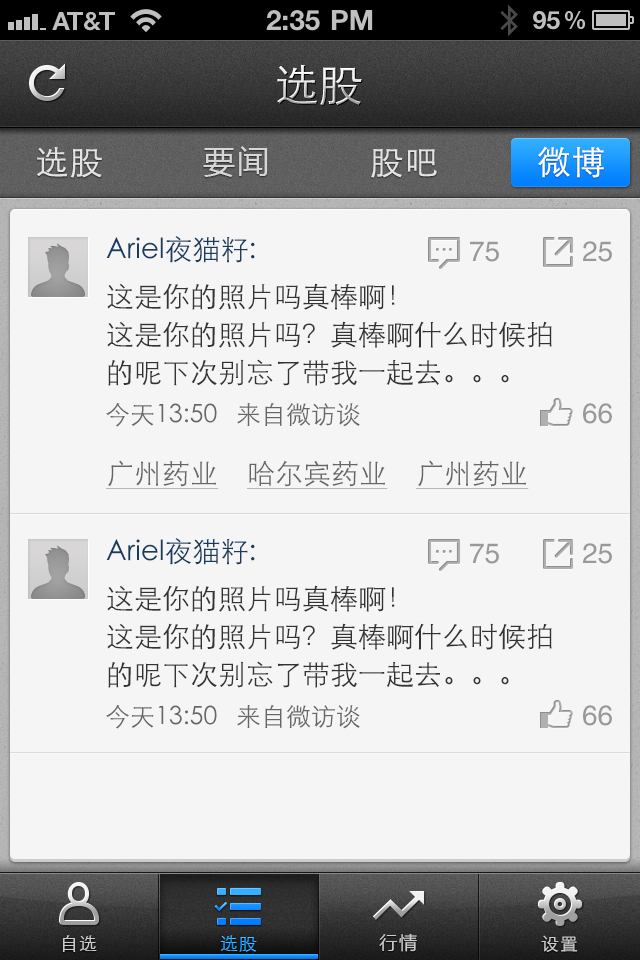
<style>
.page{position:relative;width:640px;height:960px;background:#f5f5f5}
.page>*{position:absolute;margin:0}
.t1{font:44px "STXihei";letter-spacing:0.005em}
.t2{font:33px "STXihei";letter-spacing:0.05em;color:#e3e3e3}
.t3{font:32px "MicrosoftYaHei";letter-spacing:0.05em;color:#d6d6d6}
.t4{font:33px "STXihei";letter-spacing:0.05em;color:#ffffff}
.t5{font:28px "STXihei";color:#183c5f}
.t6{font:28px "STXihei";color:#333333}
.t7{font:28px "HelveticaCE-Regular";color:#999999}
.t8{font:28px/38px "STXihei";color:#333333}
.t9{font:25px "STXihei";color:#666666}
.t10{font:28px "STXihei";color:#666666;text-decoration:underline}
.t11{font:18px "STXihei";letter-spacing:0.05em;color:#cccccc}
.t12{font:18px "STXihei";letter-spacing:0.05em}
.t13{font:18px "MicrosoftYaHei";letter-spacing:0.1em;color:#cccccc}
</style>
<div class="page">
<p class="t1" style="left:277px;top:64px;width:85px;height:42px">选股</p>
<p class="t2" style="left:37px;top:147px;width:65px;height:31px">选股</p>
<p class="t3" style="left:203px;top:146px;width:65px;height:31px">要闻</p>
<p class="t2" style="left:371px;top:149px;width:66px;height:29px">股吧</p>
<p class="t4" style="left:538px;top:146px;width:66px;height:32px">微博</p>
<p class="t5" style="left:106px;top:236px;width:149px;height:27px">Ariel夜猫籽<span class="t6">:</span></p>
<p class="t7" style="left:470px;top:241px;width:29px;height:21px">75</p>
<p class="t7" style="left:583px;top:241px;width:29px;height:21px">25</p>
<p class="t8" style="left:107px;top:283px;width:445px;height:103px">这是你的照片吗真棒啊！<br>这是你的照片吗？真棒啊什么时候拍<br>的呢下次别忘了带我一起去。。。</p>
<p class="t9" style="left:106px;top:402px;width:254px;height:25px">今天13:50   来自微访谈</p>
<p class="t7" style="left:583px;top:403px;width:29px;height:21px">66</p>
<p class="t10" style="left:106px;top:460px;width:113px;height:29px">广州药业</p>
<p class="t10" style="left:247px;top:460px;width:141px;height:29px">哈尔宾药业</p>
<p class="t10" style="left:416px;top:460px;width:113px;height:29px">广州药业</p>
<p class="t5" style="left:106px;top:538px;width:149px;height:27px">Ariel夜猫籽<span class="t6">:</span></p>
<p class="t7" style="left:470px;top:543px;width:29px;height:21px">75</p>
<p class="t7" style="left:583px;top:543px;width:29px;height:21px">25</p>
<p class="t8" style="left:107px;top:585px;width:445px;height:103px">这是你的照片吗真棒啊！<br>这是你的照片吗？真棒啊什么时候拍<br>的呢下次别忘了带我一起去。。。</p>
<p class="t9" style="left:106px;top:704px;width:254px;height:25px">今天13:50   来自微访谈</p>
<p class="t7" style="left:583px;top:705px;width:29px;height:21px">66</p>
<p class="t11" style="left:62px;top:935px;width:35px;height:17px">自选</p>
<p class="t12" style="left:220px;top:935px;width:37px;height:17px">选股</p>
<p class="t13" style="left:379px;top:933px;width:38px;height:19px">行情</p>
<p class="t11" style="left:541px;top:935px;width:37px;height:17px">设置</p>
</div>
